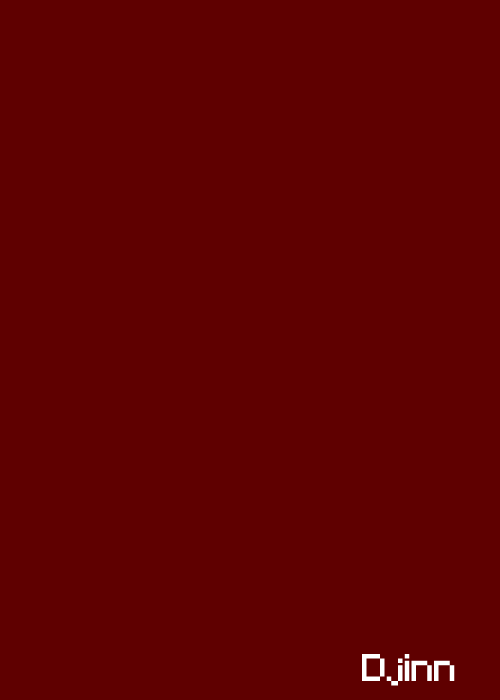
<style>
.page{position:relative;width:500px;height:700px;background:#5f0000}
.page>*{position:absolute;margin:0}
.t1{font:36px "Minecraft";color:#ffffff}
</style>
<div class="page">
<p class="t1" style="left:362px;top:654px;width:93px;height:32px">Djinn</p>
</div>
